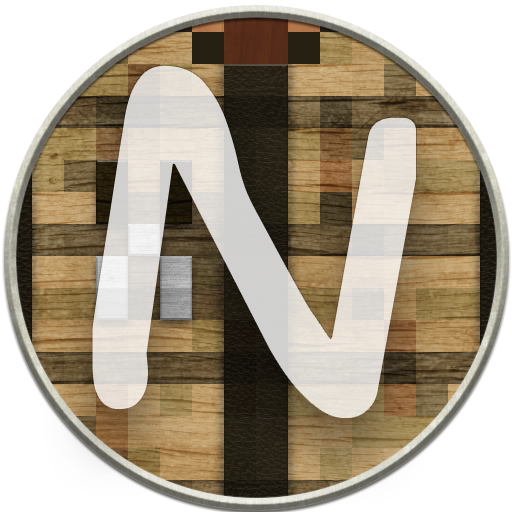
<style>
.page{position:relative;width:512px;height:512px}
.page>*{position:absolute;margin:0}
.t1{font:640.1px "FZMWJW--GB1-0";letter-spacing:-0.05em;color:#dfdad4;font-weight:bold}
</style>
<div class="page">
<p class="t1" style="left:91px;top:64px;width:326px;height:355px">N</p>
</div>
